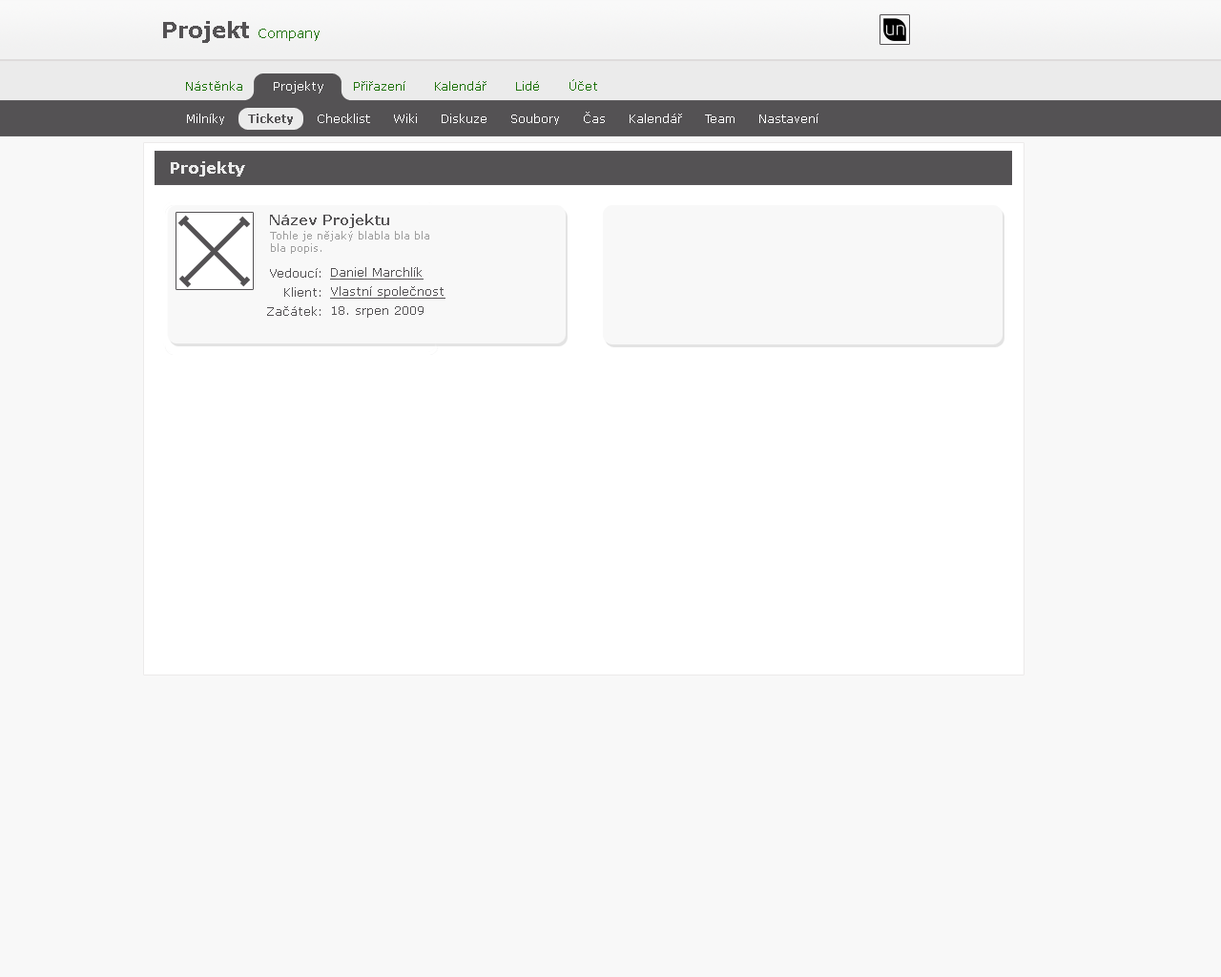
<style>
.page{position:relative;width:1221px;height:977px;background:#f8f8f8}
.page>*{position:absolute;margin:0}
.t1{font:21.9px "Verdana-Bold";color:#545254}
.t2{font:13.4px "Verdana";color:#20720d}
.t3{font:12.4px "Verdana";color:#20720d}
.t4{font:12.4px "Verdana";color:#ffffff}
.t5{font:11.4px "Verdana";color:#ffffff}
.t6{font:11.4px "Verdana-Bold";color:#545254}
.t7{font:16.2px "Verdana-Bold";color:#ebebeb}
.t8{font:14.3px "Verdana-Bold";color:#545254}
.t9{font:10.5px "Verdana";color:#9e9e9e}
.t10{font:12.4px/19.1px "Verdana";color:#545254}
.t11{font:12.4px/19.1px "Verdana";color:#545254;text-decoration:underline}
</style>
<div class="page">
<p class="t1" style="left:163px;top:21px;width:157px;height:22px">Projekt <span class="t2">Company</span></p>
<p class="t3" style="left:186px;top:81px;width:56px;height:10px">Nástěnka</p>
<p class="t3" style="left:274px;top:79px;width:323px;height:14px"><span class="t4">Projekty      </span>Přiřazení      Kalendář      Lidé      Účet</p>
<p class="t5" style="left:187px;top:112px;width:631px;height:13px">Milníky      <span class="t6">Tickety      </span>Checklist      Wiki      Diskuze      Soubory      Čas      Kalendář      Team      Nastavení</p>
<p class="t7" style="left:171px;top:161px;width:74px;height:15px">Projekty</p>
<p class="t8" style="left:270px;top:214px;width:119px;height:14px">Název Projektu</p>
<p class="t9" style="left:270px;top:231px;width:159px;height:23px">Tohle je nějaký blabla bla bla<br>bla popis.</p>
<p class="t10" style="left:267px;top:268px;width:53px;height:48px;text-align:right">Vedoucí:<br>Klient:<br>Začátek:</p>
<p class="t11" style="left:330px;top:267px;width:115px;height:51px">Daniel Marchlík<br>Vlastní společnost<br><span class="t10">18. srpen 2009</span></p>
</div>
